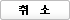
<style>
.page{position:relative;width:70px;height:20px;background:#ffffff}
.page>*{position:absolute;margin:0}
.t1{font:12px "morris9";color:#000000;font-weight:bold;scale:0.96 1}
</style>
<div class="page">
<p class="t1" style="left:19px;top:5px;width:31px;height:10px">취  소</p>
</div>
